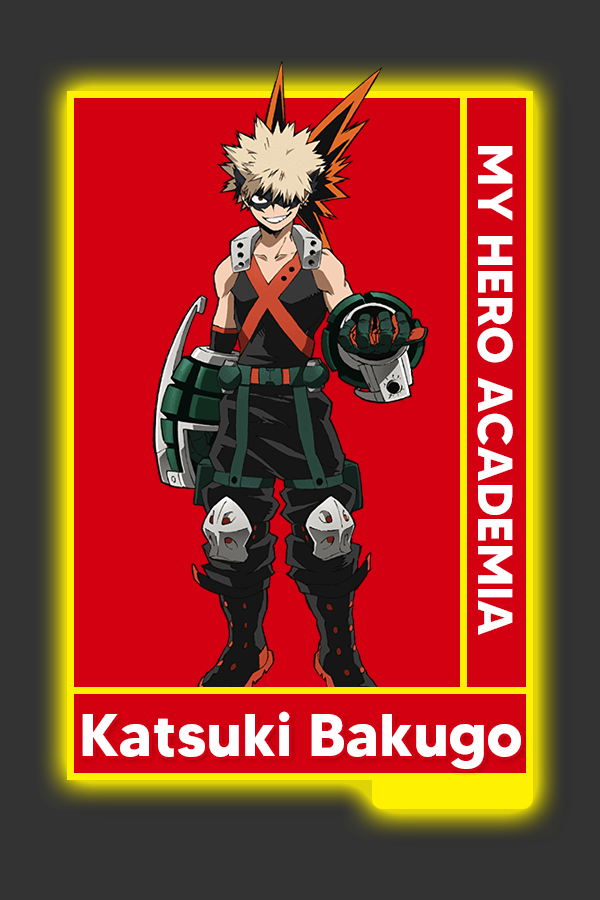
<style>
.page{position:relative;width:600px;height:900px;background:#d20010}
.page>*{position:absolute;margin:0}
.t1{font:48.8px "MADETOMMY-Bold";color:#ffffff}
.t2{font:60.3px "MADETOMMY-Bold";color:#ffffff}
</style>
<div class="page">
<p class="t1" style="left:477px;top:146px;width:36px;height:489px;rotate:90deg">MY HERO ACADEMIA</p>
<p class="t2" style="left:82px;top:711px;width:439px;height:58px">Katsuki Bakugo</p>
</div>
